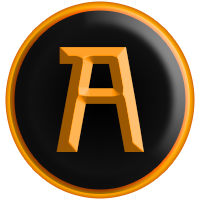
<style>
.page{position:relative;width:200px;height:200px;background:#ffffff}
.page>*{position:absolute;margin:0}
.t1{font:156.2px "HalbfetteSecession";letter-spacing:0.025em;scale:1.11 1}
</style>
<div class="page">
<p class="t1" style="left:56px;top:47px;width:88px;height:105px">A</p>
</div>
